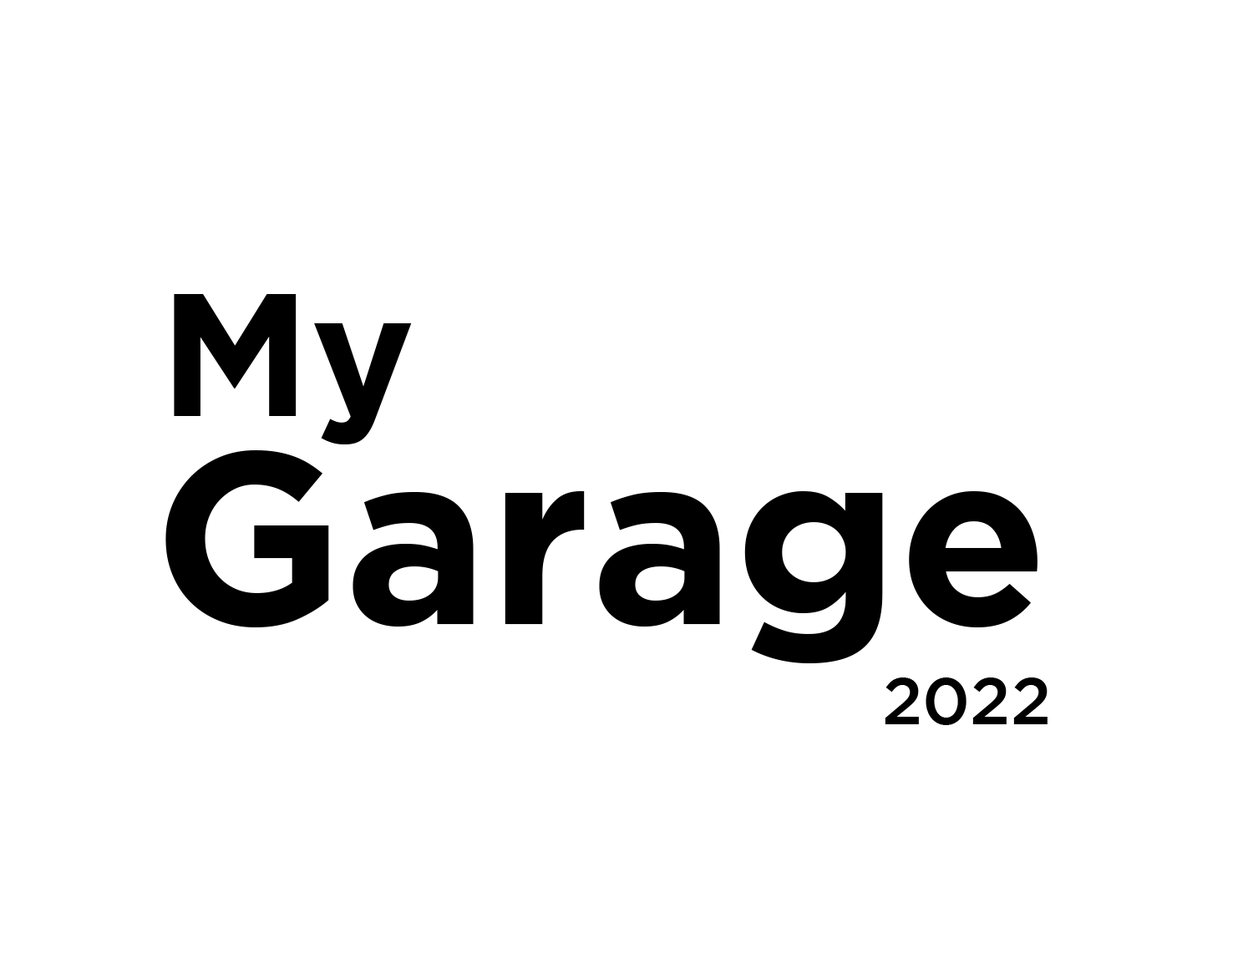
<style>
.page{position:relative;width:1243px;height:959px;background:#ffffff}
.page>*{position:absolute;margin:0}
.t1{font:174.1px "Gotham-Bold";color:#000000}
.t2{font:243.7px "Gotham-Bold";color:#000000}
.t3{font:66.1px "Gotham-Medium";color:#000000}
</style>
<div class="page">
<p class="t1" style="left:174px;top:294px;width:238px;height:150px">My</p>
<p class="t2" style="left:165px;top:450px;width:873px;height:213px">Garage</p>
<p class="t3" style="left:885px;top:678px;width:163px;height:47px">2022</p>
</div>
